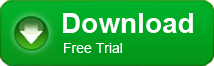
<style>
.page{position:relative;width:214px;height:66px}
.page>*{position:absolute;margin:0}
.t1{font:28px "Arial-BoldMT";color:#ffffff}
.t2{font:14px "ArialMT";color:#ffffff}
</style>
<div class="page">
<p class="t1" style="left:63px;top:13px;width:130px;height:20px">Download</p>
<p class="t2" style="left:64px;top:43px;width:58px;height:10px">Free Trial</p>
</div>
